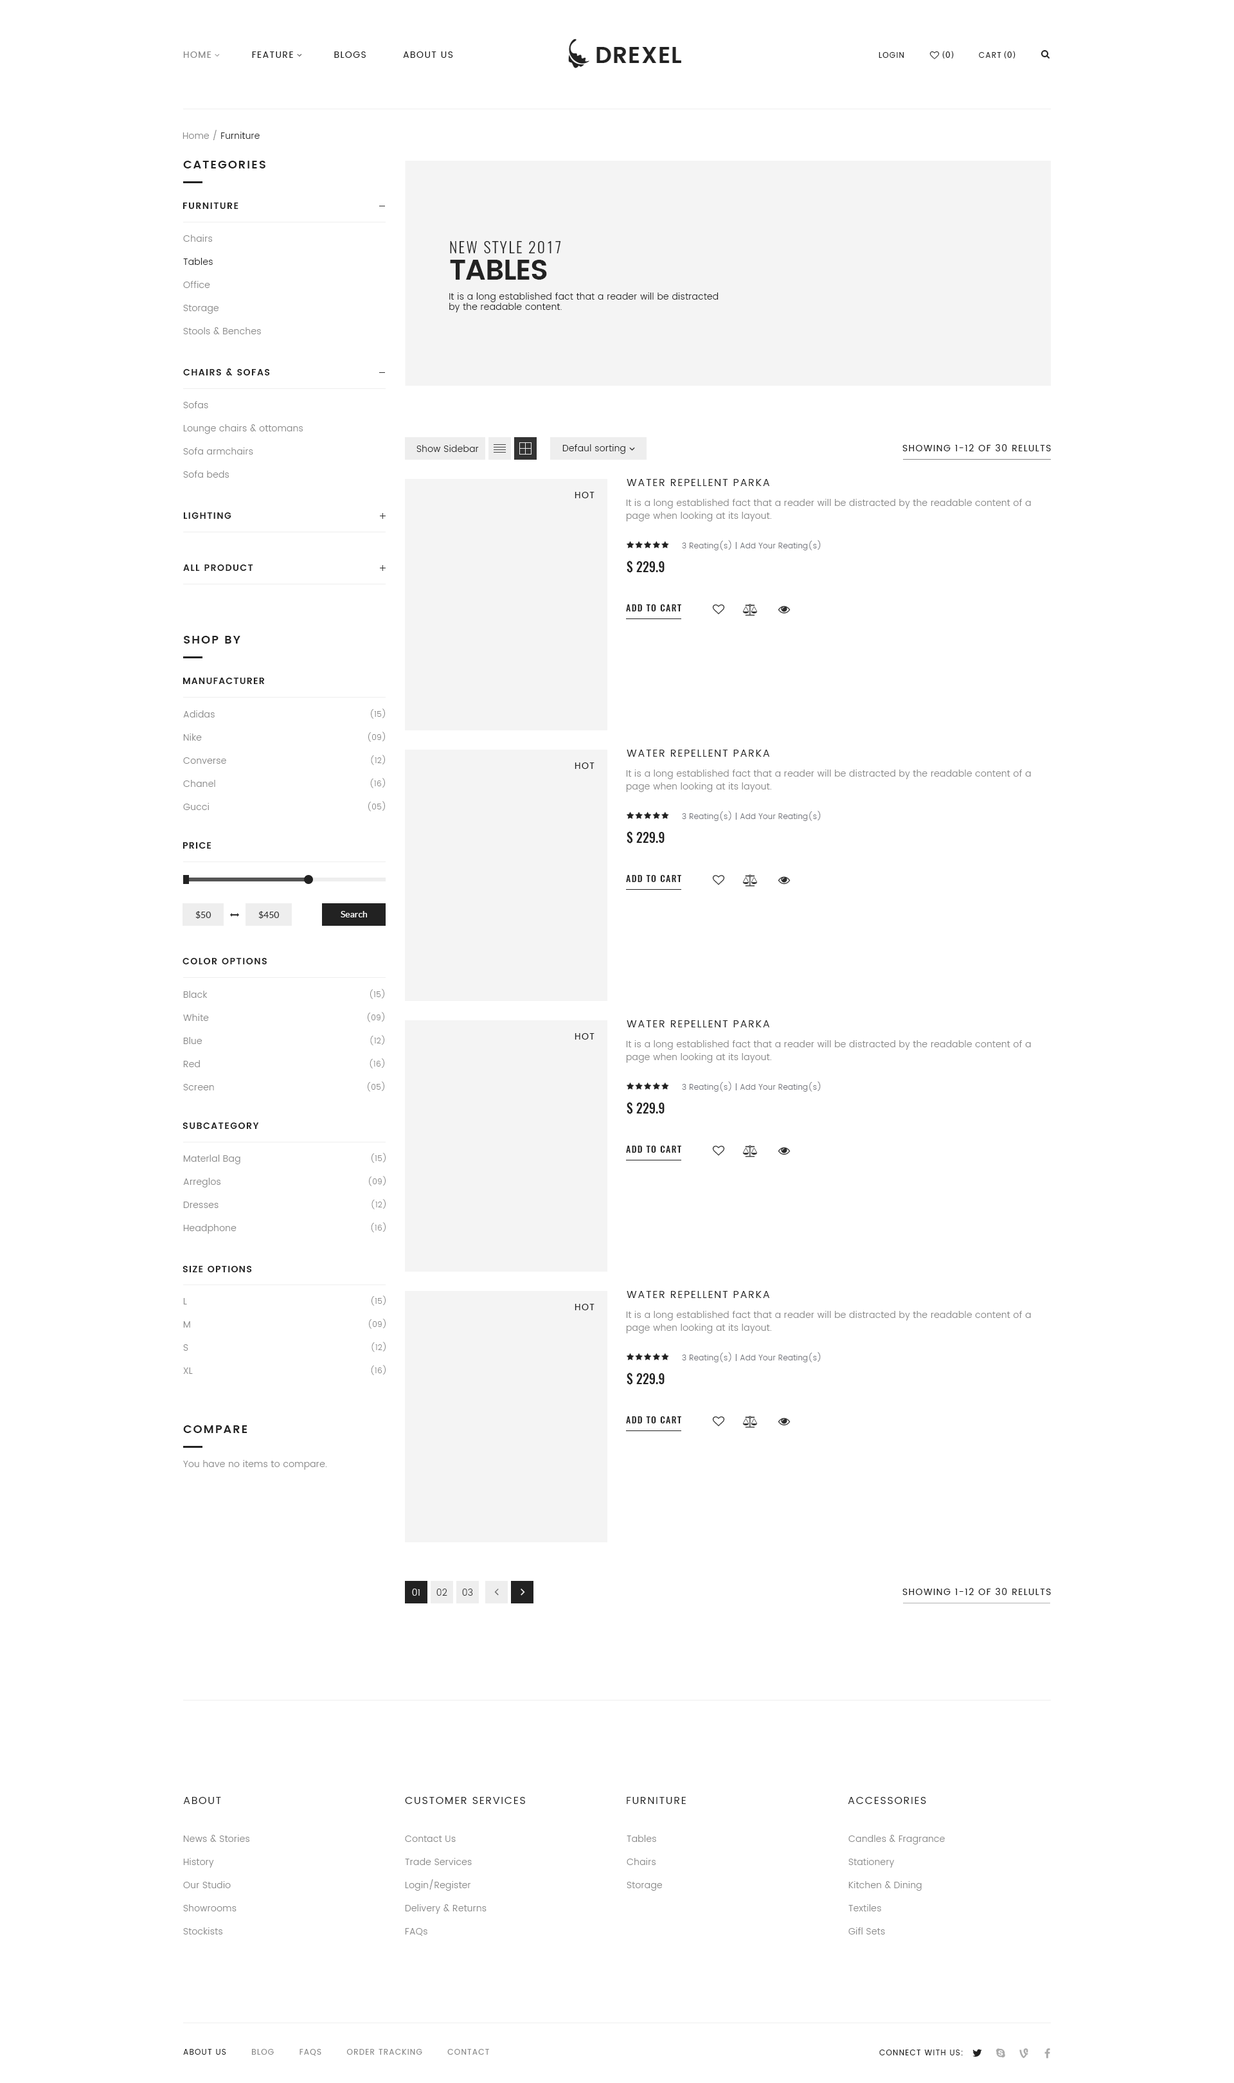
<style>
.page{position:relative;width:1234px;height:2083px;background:#ffffff}
.page>*{position:absolute;margin:0}
.t1{font:9px "Poppins-Regular";letter-spacing:0.1em;color:#222222;text-transform:uppercase}
.t2{font:9px "Poppins-Regular";letter-spacing:0.1em;color:#888888;text-transform:uppercase}
.t3{font:7.7px "Poppins-Regular";letter-spacing:0.1em;color:#222222;text-transform:uppercase}
.t4{font:9px "MyriadPro-Regular";letter-spacing:0.1em;color:#222222;text-transform:uppercase}
.t5{font:9px "Poppins-Light";letter-spacing:0.025em;color:#222222}
.t6{font:9px "Poppins-Light";letter-spacing:0.025em;color:#888888}
.t7{font:11.6px "Poppins-SemiBold";letter-spacing:0.1em;color:#222222;text-transform:uppercase}
.t8{font:9px "Poppins-SemiBold";letter-spacing:0.1em;color:#222222;text-transform:uppercase}
.t9{font:9px/23.1px "Poppins-Light";letter-spacing:0.025em;color:#888888}
.t10{font:9px/23.1px "Poppins-Light";letter-spacing:0.025em;color:#222222}
.t11{font:15.4px "Oswald-Light";letter-spacing:0.1em;color:#222222;text-transform:uppercase}
.t12{font:28.7px "Poppins-SemiBold";letter-spacing:-0.025em;color:#222222;text-transform:uppercase}
.t13{font:10.3px "Poppins-Regular";letter-spacing:0.1em;color:#222222;text-transform:uppercase}
.t14{font:9px/12.9px "Poppins-Light";letter-spacing:0.025em;color:#888888}
.t15{font:7.7px "Poppins-Light";letter-spacing:0.025em;color:#71737a}
.t16{font:12.9px "Oswald-Medium";color:#222222}
.t17{font:9px "Oswald-Medium";letter-spacing:0.1em;color:#222222;text-transform:uppercase}
.t18{font:7.7px/23.1px "Poppins-Light";letter-spacing:0.025em;color:#888888}
.t19{font:9px "Lato-Regular";color:#333333}
.t20{font:9px "Lato-Regular";color:#ffffff}
.t21{font:9.2px "Poppins-SemiBold";letter-spacing:0.1em;color:#222222;text-transform:uppercase}
.t22{font:9px "Poppins-Light";letter-spacing:0.025em;color:#eeeeee;text-transform:uppercase}
.t23{font:9px "Poppins-Light";letter-spacing:0.025em;color:#333333;text-transform:uppercase}
.t24{font:7.7px "Poppins-Regular";letter-spacing:0.1em;color:#888888;text-transform:uppercase}
</style>
<div class="page">
<p class="t1" style="left:183px;top:51px;width:270px;height:7px"><span class="t2">Home</span>           Feature           Blogs          About Us</p>
<p class="t3" style="left:879px;top:52px;width:26px;height:6px">Login</p>
<p class="t4" style="left:942px;top:51px;width:12px;height:8px">(0)</p>
<p class="t3" style="left:979px;top:52px;width:23px;height:6px">Cart</p>
<p class="t4" style="left:1004px;top:51px;width:12px;height:8px">(0)</p>
<p class="t5" style="left:183px;top:130px;width:77px;height:10px"><span class="t6">Home / </span>Furniture</p>
<p class="t7" style="left:183px;top:161px;width:83px;height:7px">categories</p>
<p class="t8" style="left:183px;top:203px;width:56px;height:6px">Furniture</p>
<p class="t9" style="left:183px;top:235px;width:78px;height:99px">Chairs<span class="t10"><br>Tables<br></span>Office<br>Storage<br>Stools &amp; Benches</p>
<p class="t11" style="left:450px;top:241px;width:111px;height:12px">New Style 2017</p>
<p class="t12" style="left:450px;top:260px;width:97px;height:20px">Tables</p>
<p class="t5" style="left:449px;top:292px;width:270px;height:20px;text-align:right">It is a long established fact that a reader will be distracted by the readable content.</p>
<p class="t8" style="left:183px;top:368px;width:87px;height:7px">Chairs &amp; sofas</p>
<p class="t9" style="left:183px;top:401px;width:120px;height:77px">Sofas<br>Lounge chairs &amp; ottomans<br>Sofa armchairs<br>Sofa beds</p>
<p class="t5" style="left:417px;top:445px;width:62px;height:7px">Show Sidebar</p>
<p class="t5" style="left:562px;top:444px;width:64px;height:10px">Defaul sorting</p>
<p class="t1" style="left:903px;top:444px;width:148px;height:7px">Showing 1-12 of 30 relults</p>
<p class="t13" style="left:627px;top:479px;width:143px;height:7px">Water Repellent Parka</p>
<p class="t1" style="left:575px;top:492px;width:20px;height:6px">Hot</p>
<p class="t14" style="left:626px;top:499px;width:405px;height:22px">It is a long established fact that a reader will be distracted by the readable content of a page when looking at its layout.</p>
<p class="t8" style="left:183px;top:512px;width:48px;height:7px">Lighting</p>
<p class="t15" style="left:682px;top:540px;width:139px;height:10px">3 Reating(s) | Add Your Reating(s)</p>
<p class="t8" style="left:183px;top:564px;width:70px;height:7px">All Product</p>
<p class="t16" style="left:627px;top:560px;width:38px;height:13px">$ 229.9</p>
<p class="t17" style="left:626px;top:604px;width:55px;height:7px">Add to cart</p>
<p class="t7" style="left:184px;top:636px;width:56px;height:8px">Shop by</p>
<p class="t8" style="left:183px;top:678px;width:82px;height:6px">Manufacturer</p>
<p class="t9" style="left:183px;top:710px;width:43px;height:100px">Adidas<br>Nike<br>Converse<br>Chanel<br>Gucci</p>
<p class="t18" style="left:368px;top:708px;width:17px;height:103px;text-align:right">(15)<br>(09)<br>(12)<br>(16)<br>(05)</p>
<p class="t13" style="left:627px;top:750px;width:143px;height:7px">Water Repellent Parka</p>
<p class="t1" style="left:575px;top:762px;width:20px;height:7px">Hot</p>
<p class="t14" style="left:626px;top:770px;width:405px;height:22px">It is a long established fact that a reader will be distracted by the readable content of a page when looking at its layout.</p>
<p class="t15" style="left:682px;top:811px;width:139px;height:10px">3 Reating(s) | Add Your Reating(s)</p>
<p class="t16" style="left:627px;top:831px;width:38px;height:13px">$ 229.9</p>
<p class="t8" style="left:183px;top:842px;width:29px;height:7px">PriCe</p>
<p class="t17" style="left:626px;top:875px;width:55px;height:7px">Add to cart</p>
<p class="t19" style="left:195px;top:911px;width:17px;height:8px">$50</p>
<p class="t19" style="left:258px;top:911px;width:22px;height:8px">$450</p>
<p class="t20" style="left:341px;top:911px;width:26px;height:6px">Search</p>
<p class="t21" style="left:183px;top:958px;width:84px;height:6px">color options</p>
<p class="t18" style="left:368px;top:989px;width:16px;height:103px;text-align:right">(15)<br>(09)<br>(12)<br>(16)<br>(05)</p>
<p class="t9" style="left:183px;top:991px;width:31px;height:99px">Black<br>White<br>Blue<br>Red<br>Screen</p>
<p class="t13" style="left:627px;top:1020px;width:143px;height:7px">Water Repellent Parka</p>
<p class="t1" style="left:575px;top:1033px;width:20px;height:7px">Hot</p>
<p class="t14" style="left:626px;top:1040px;width:405px;height:23px">It is a long established fact that a reader will be distracted by the readable content of a page when looking at its layout.</p>
<p class="t15" style="left:682px;top:1081px;width:139px;height:11px">3 Reating(s) | Add Your Reating(s)</p>
<p class="t16" style="left:627px;top:1101px;width:38px;height:14px">$ 229.9</p>
<p class="t21" style="left:183px;top:1122px;width:76px;height:7px">Subcategory</p>
<p class="t17" style="left:626px;top:1146px;width:55px;height:7px">Add to cart</p>
<p class="t9" style="left:183px;top:1155px;width:57px;height:79px">Materlal Bag<br>Arreglos<br>Dresses<br>Headphone</p>
<p class="t18" style="left:369px;top:1153px;width:17px;height:79px;text-align:right">(15)<br>(09)<br>(12)<br>(16)</p>
<p class="t8" style="left:183px;top:1266px;width:69px;height:6px">Size options</p>
<p class="t9" style="left:183px;top:1298px;width:10px;height:76px">L<br>M<br>S<br>XL</p>
<p class="t18" style="left:369px;top:1295px;width:17px;height:80px;text-align:right">(15)<br>(09)<br>(12)<br>(16)</p>
<p class="t13" style="left:627px;top:1291px;width:143px;height:7px">Water Repellent Parka</p>
<p class="t1" style="left:575px;top:1304px;width:20px;height:6px">Hot</p>
<p class="t14" style="left:626px;top:1311px;width:405px;height:22px">It is a long established fact that a reader will be distracted by the readable content of a page when looking at its layout.</p>
<p class="t15" style="left:682px;top:1352px;width:139px;height:10px">3 Reating(s) | Add Your Reating(s)</p>
<p class="t16" style="left:627px;top:1372px;width:38px;height:13px">$ 229.9</p>
<p class="t17" style="left:626px;top:1416px;width:55px;height:7px">Add to cart</p>
<p class="t7" style="left:183px;top:1425px;width:65px;height:8px">Compare</p>
<p class="t6" style="left:183px;top:1460px;width:144px;height:10px">You have no items to compare.</p>
<p class="t22" style="left:412px;top:1589px;width:8px;height:7px">01</p>
<p class="t23" style="left:437px;top:1589px;width:10px;height:7px">02</p>
<p class="t23" style="left:462px;top:1589px;width:11px;height:7px">03</p>
<p class="t1" style="left:903px;top:1588px;width:148px;height:7px">Showing 1-12 of 30 relults</p>
<p class="t13" style="left:183px;top:1797px;width:38px;height:7px">About</p>
<p class="t13" style="left:405px;top:1797px;width:120px;height:7px">Customer services</p>
<p class="t13" style="left:627px;top:1797px;width:59px;height:7px">Furniture</p>
<p class="t13" style="left:848px;top:1797px;width:78px;height:7px">Accessories</p>
<p class="t9" style="left:183px;top:1835px;width:66px;height:99px">News &amp; Stories<br>History<br>Our Studio<br>Showrooms<br>Stockists</p>
<p class="t9" style="left:405px;top:1835px;width:82px;height:101px">Contact Us<br>Trade Services<br>Login/Register<br>Delivery &amp; Returns<br>FAQs</p>
<p class="t9" style="left:627px;top:1835px;width:35px;height:56px">Tables<br>Chairs<br>Storage</p>
<p class="t9" style="left:849px;top:1835px;width:96px;height:99px">Candles &amp; Fragrance<br>Stationery<br>Kitchen &amp; Dining<br>Textiles<br>Gifl Sets</p>
<p class="t24" style="left:183px;top:2049px;width:306px;height:7px"><span class="t3">About Us</span>        Blog        FAQs        Order Tracking        Contact</p>
<p class="t3" style="left:879px;top:2049px;width:84px;height:6px">Connect with us:</p>
</div>
